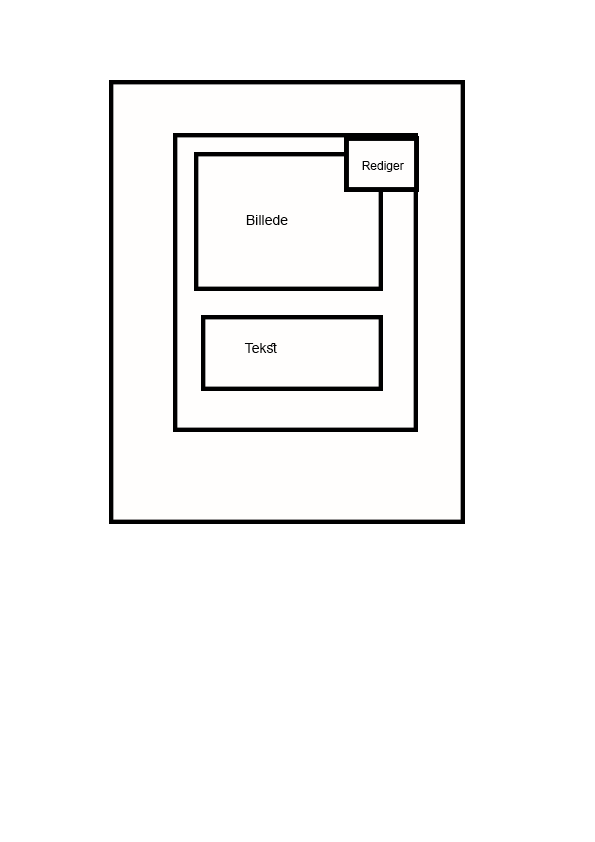
<style>
.page{position:relative;width:595px;height:842px;background:#ffffff}
.page>*{position:absolute;margin:0}
.t1{font:12px "ArialMT";color:#040404}
.t2{font:14px "ArialMT";color:#040404}
</style>
<div class="page">
<p class="t1" style="left:362px;top:161px;width:42px;height:11px">Rediger</p>
<p class="t2" style="left:246px;top:215px;width:42px;height:10px">Billede</p>
<p class="t2" style="left:244px;top:343px;width:33px;height:10px">Tekst</p>
</div>
